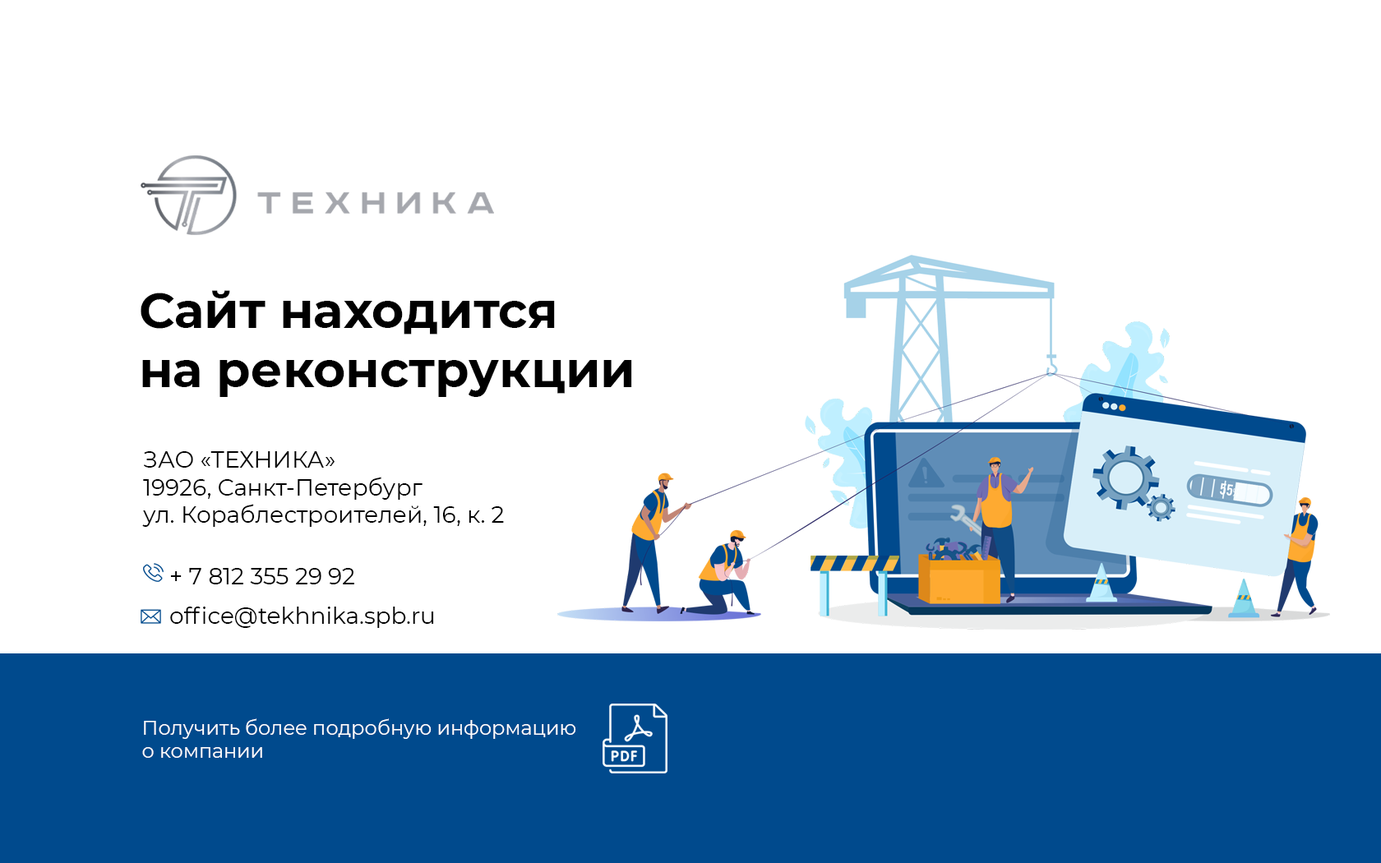
<style>
.page{position:relative;width:1381px;height:863px;background:#ffffff}
.page>*{position:absolute;margin:0}
.t1{font:49.3px "Montserrat-Bold";color:#000000}
.t2{font:23px "Montserrat-Regular";color:#000000}
.t3{font:23px/39.5px "Montserrat-Regular";color:#000000}
.t4{font:19.7px "Montserrat-Regular";color:#ffffff}
</style>
<div class="page">
<p class="t1" style="left:141px;top:290px;width:491px;height:107px">Сайт находится<br>на реконструкции</p>
<p class="t2" style="left:142px;top:451px;width:362px;height:76px">ЗАО «ТЕХНИКА»<br>19926, Санкт-Петербург<br>ул. Кораблестроителей, 16, к. 2</p>
<p class="t3" style="left:170px;top:568px;width:264px;height:60px">+ 7 812 355 29 92<br>office@tekhnika.spb.ru</p>
<p class="t4" style="left:142px;top:719px;width:434px;height:39px">Получить более подробную информацию<br>о компании</p>
</div>
